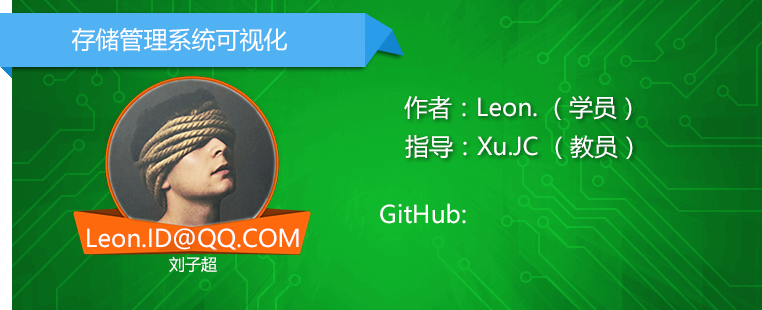
<style>
.page{position:relative;width:762px;height:310px}
.page>*{position:absolute;margin:0}
.t1{font:24px "MicrosoftYaHei";color:#ffffff}
.t2{font:24px/30px "MicrosoftYaHei";color:#ffffff}
.t3{font:16px/30px "MicrosoftYaHei";color:#ffffff}
</style>
<div class="page">
<p class="t1" style="left:71px;top:27px;width:216px;height:25px">存储管理系统可视化</p>
<p class="t1" style="left:404px;top:95px;width:228px;height:25px">作者：Leon. （学员）</p>
<p class="t1" style="left:405px;top:135px;width:228px;height:24px">指导：Xu.JC （教员）</p>
<p class="t1" style="left:380px;top:203px;width:86px;height:21px">GitHub:</p>
<p class="t2" style="left:87px;top:228px;width:212px;height:44px;text-align:center">Leon.ID@QQ.COM<br><span class="t3">刘子超</span></p>
</div>
